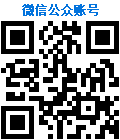
<style>
.page{position:relative;width:120px;height:140px;background:#ffffff}
.page>*{position:absolute;margin:0}
.t1{font:12px "SimSun";color:#0273dd;font-weight:bold}
</style>
<div class="page">
<p class="t1" style="left:22px;top:4px;width:77px;height:12px">微信公众账号</p>
</div>
